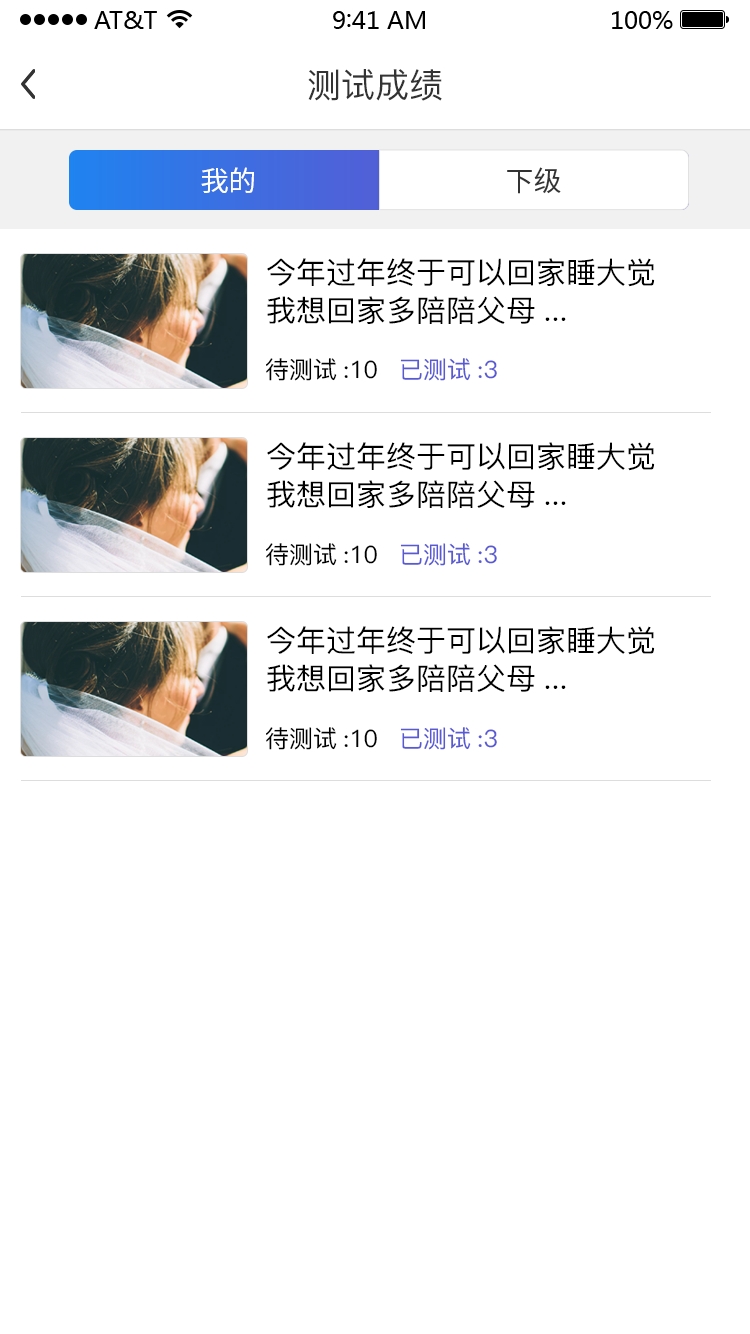
<style>
.page{position:relative;width:750px;height:1334px;background:#ffffff}
.page>*{position:absolute;margin:0}
.t1{font:34px "PingFang-SC-Medium";color:#333333}
.t2{font:28px "SourceHanSansCN-Regular";color:#ffffff}
.t3{font:28px "SourceHanSansCN-Regular";color:#333333}
.t4{font:30px/38px "PingFang-SC-Medium";color:#000000}
.t5{font:24px "PingFang-SC-Medium";color:#000000}
.t6{font:24px "PingFang-SC-Medium";color:#595ad3}
</style>
<div class="page">
<p class="t1" style="left:308px;top:69px;width:134px;height:32px">测试成绩</p>
<p class="t2" style="left:201px;top:167px;width:53px;height:26px">我的</p>
<p class="t3" style="left:507px;top:167px;width:54px;height:27px">下级</p>
<p class="t4" style="left:267px;top:258px;width:388px;height:66px">今年过年终于可以回家睡大觉<br>我想回家多陪陪父母...</p>
<p class="t5" style="left:266px;top:358px;width:111px;height:23px">待测试:10</p>
<p class="t6" style="left:400px;top:358px;width:97px;height:23px">已测试:3</p>
<p class="t4" style="left:267px;top:442px;width:388px;height:66px">今年过年终于可以回家睡大觉<br>我想回家多陪陪父母...</p>
<p class="t5" style="left:266px;top:543px;width:111px;height:23px">待测试:10</p>
<p class="t6" style="left:400px;top:543px;width:97px;height:23px">已测试:3</p>
<p class="t4" style="left:267px;top:626px;width:388px;height:66px">今年过年终于可以回家睡大觉<br>我想回家多陪陪父母...</p>
<p class="t5" style="left:266px;top:727px;width:111px;height:23px">待测试:10</p>
<p class="t6" style="left:400px;top:727px;width:97px;height:23px">已测试:3</p>
</div>
